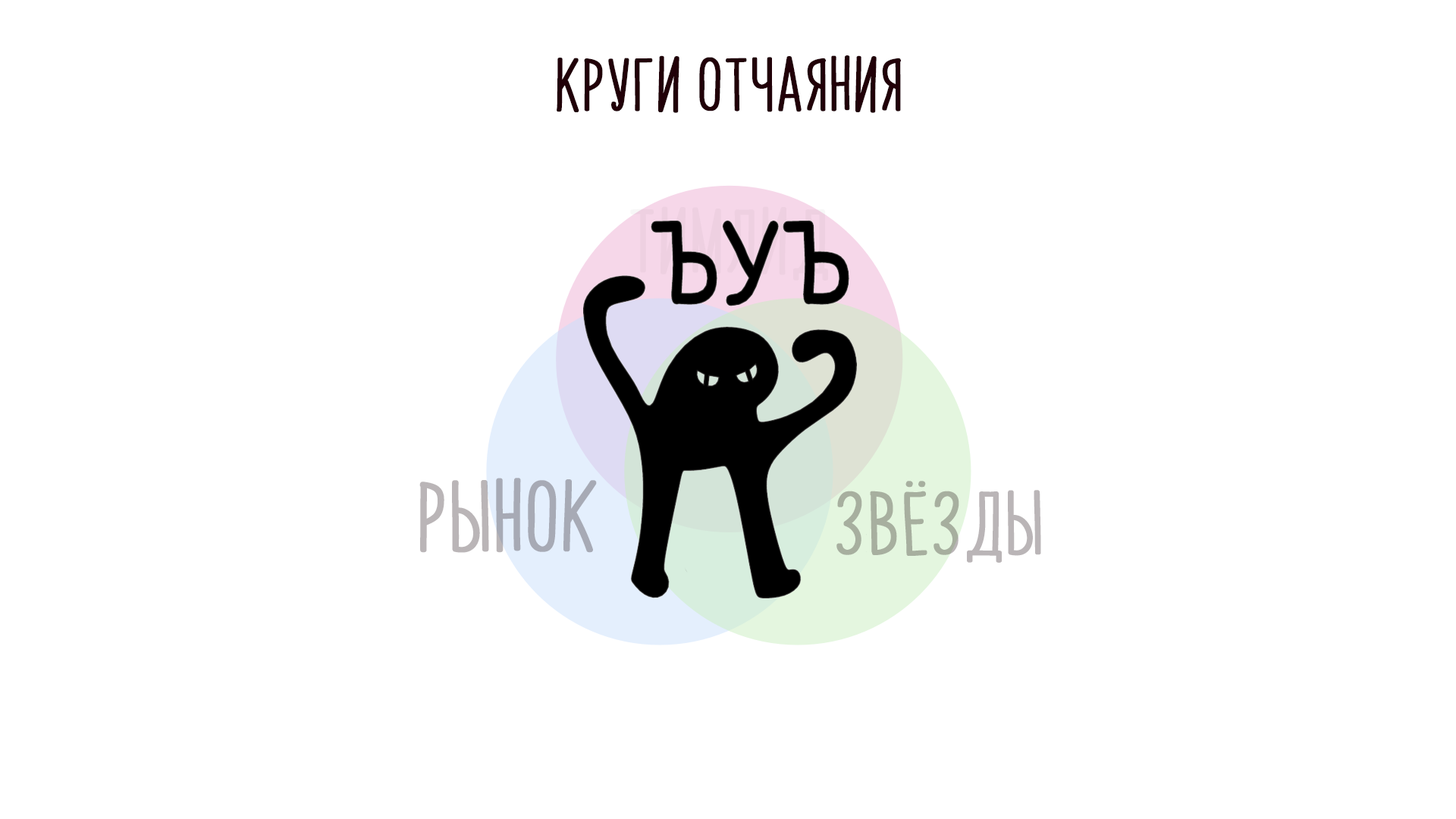
<style>
.page{position:relative;width:1456px;height:819px;background:#ffffff}
.page>*{position:absolute;margin:0}
.t1{font:45.5px "PapayaSunrise";color:#210008;font-weight:bold}
.t2{font:60.7px "PapayaSunrise";color:#a7aab5;font-weight:bold}
.t3{font:54.6px "PapayaSunrise";font-weight:bold}
</style>
<div class="page">
<p class="t1" style="left:557px;top:55px;width:344px;height:58px">Круги отчаяния</p>
<p class="t2" style="left:419px;top:478px;width:178px;height:75px">рынок</p>
<p class="t3" style="left:836px;top:481px;width:205px;height:82px">звёзды</p>
</div>
